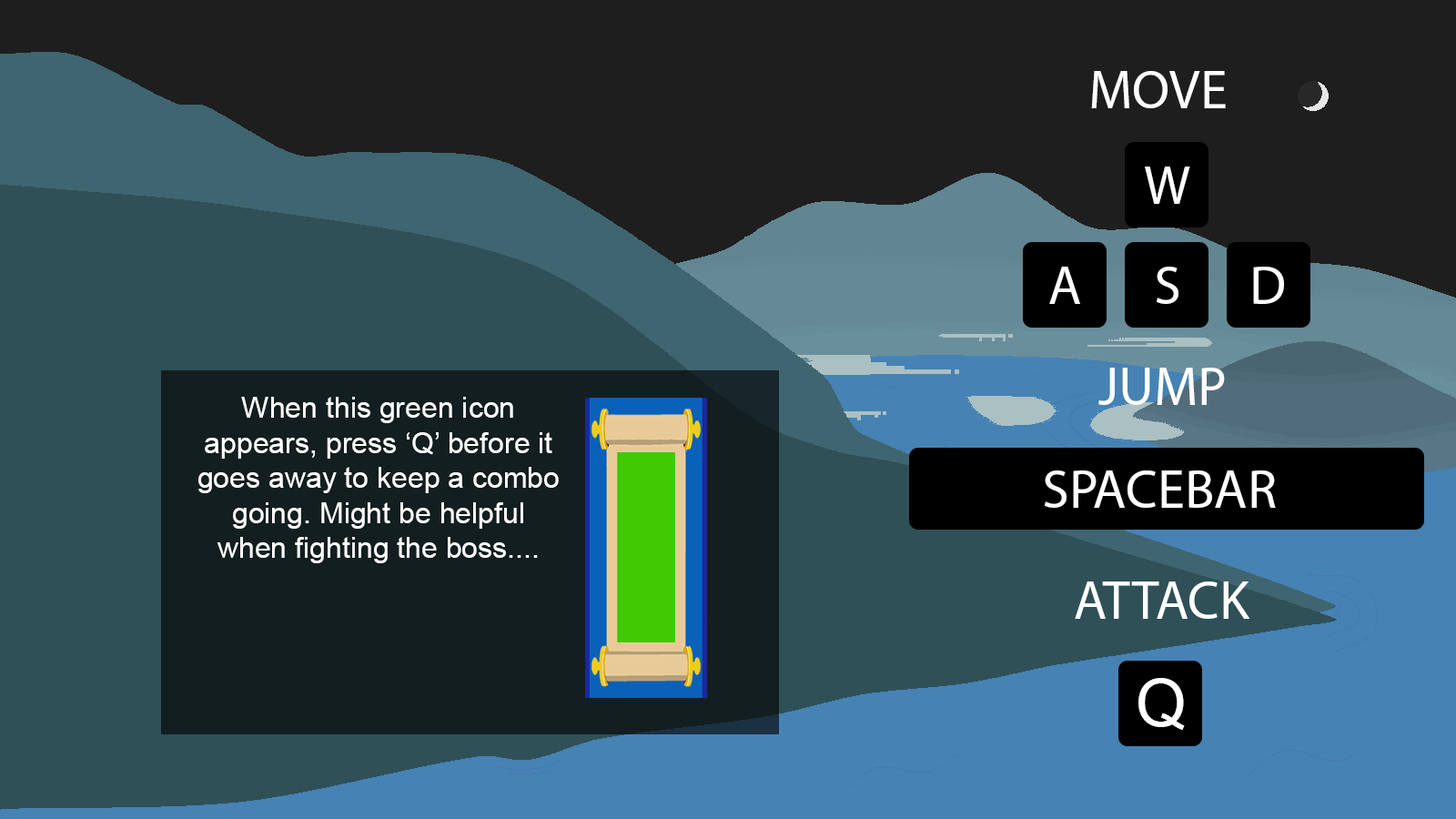
<style>
.page{position:relative;width:1456px;height:819px;background:#1e1e1e}
.page>*{position:absolute;margin:0}
.t1{font:29.1px "ArialMT";color:#ffffff}
.t2{font:65.5px "ArialMT";color:#ffffff}
</style>
<div class="page">
<p class="t1" style="left:198px;top:397px;width:361px;height:166px;text-align:center">When this green icon <br>appears, press ‘Q’ before it goes away to keep a combo going. Might be helpful when fighting the boss....</p>
<p class="t2" style="left:1138px;top:678px;width:47px;height:52px">Q</p>
</div>
